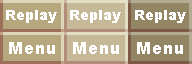
<style>
.page{position:relative;width:192px;height:64px;background:#c5b998}
.page>*{position:absolute;margin:0}
.t1{font:13.9px "Arial-Black";color:#ffffff}
.t2{font:16.7px "Arial-Black";color:#ffffff}
</style>
<div class="page">
<p class="t1" style="left:6px;top:10px;width:51px;height:13px">Replay</p>
<p class="t1" style="left:70px;top:10px;width:51px;height:13px">Replay</p>
<p class="t1" style="left:135px;top:10px;width:51px;height:13px">Replay</p>
<p class="t2" style="left:9px;top:42px;width:46px;height:12px">Menu</p>
<p class="t2" style="left:73px;top:42px;width:46px;height:12px">Menu</p>
<p class="t2" style="left:137px;top:42px;width:46px;height:12px">Menu</p>
</div>
